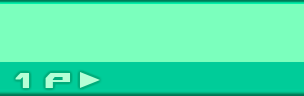
<style>
.page{position:relative;width:304px;height:96px;background:#7bffbd}
.page>*{position:absolute;margin:0}
.t1{font:25px "Extremist";letter-spacing:-0.05em;color:#b5ffd6}
</style>
<div class="page">
<p class="t1" style="left:15px;top:73px;width:55px;height:15px">1P</p>
</div>
